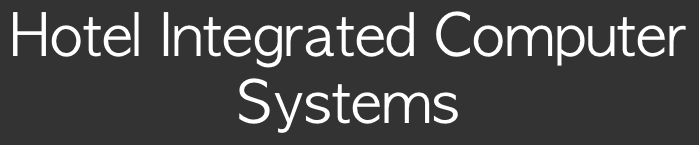
<style>
.page{position:relative;width:699px;height:145px;background:#333333}
.page>*{position:absolute;margin:0}
.t1{font:56px "AppleGothic";color:#ffffff}
</style>
<div class="page">
<p class="t1" style="left:13px;top:11px;width:673px;height:122px;text-align:center">Hotel Integrated Computer<br>Systems</p>
</div>
